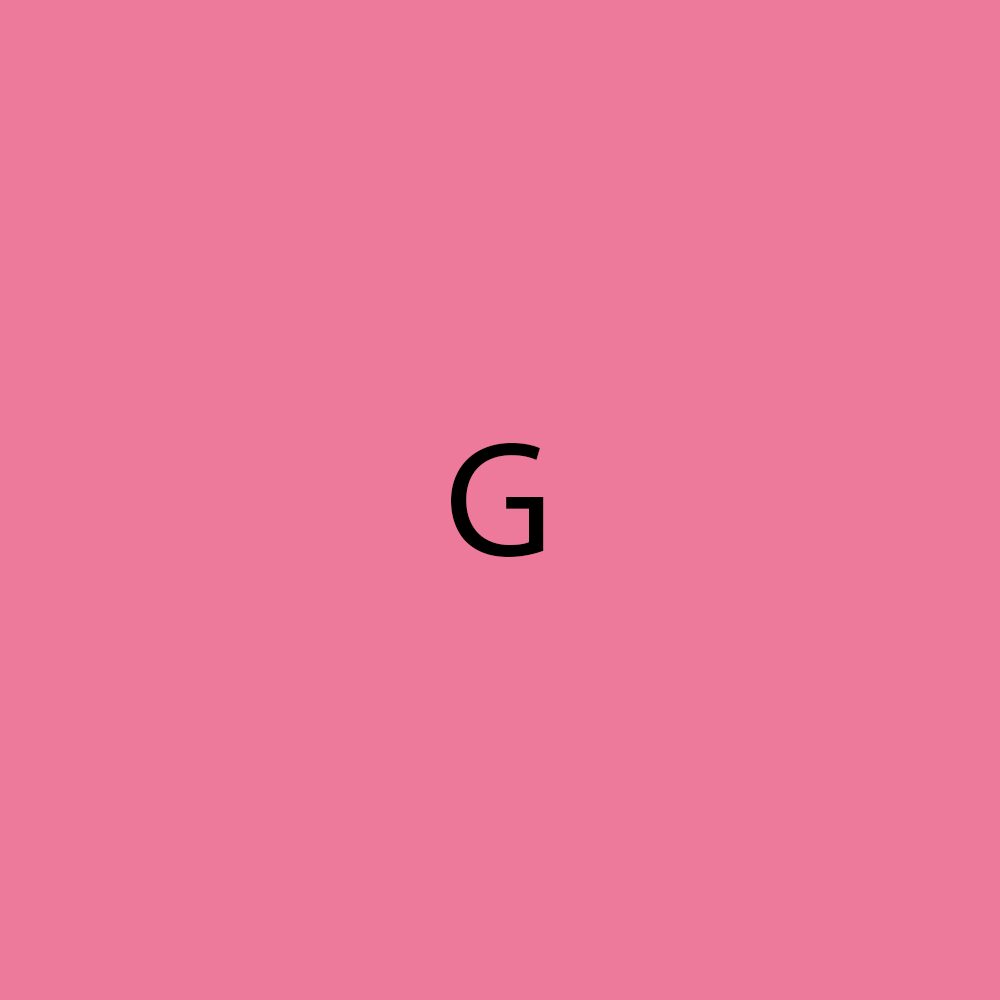
<style>
.page{position:relative;width:1000px;height:1000px;background:#ed7a9b}
.page>*{position:absolute;margin:0}
.t1{font:166.7px "MyriadPro-Regular";color:#000000}
</style>
<div class="page">
<p class="t1" style="left:451px;top:442px;width:93px;height:115px">G</p>
</div>
